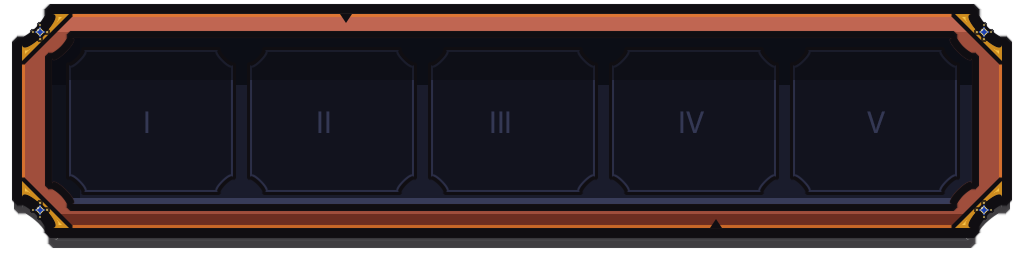
<style>
.page{position:relative;width:1024px;height:256px;background:#12131e}
.page>*{position:absolute;margin:0}
.t1{font:32px "MyriadPro-Regular";color:#343854}
</style>
<div class="page">
<p class="t1" style="left:145px;top:111px;width:4px;height:22px">I</p>
<p class="t1" style="left:318px;top:111px;width:12px;height:22px">II</p>
<p class="t1" style="left:491px;top:111px;width:19px;height:22px">III</p>
<p class="t1" style="left:680px;top:111px;width:24px;height:22px">IV</p>
<p class="t1" style="left:867px;top:111px;width:18px;height:22px">V</p>
</div>
